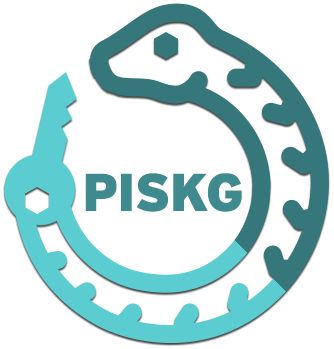
<style>
.page{position:relative;width:334px;height:349px;background:#ffffff}
.page>*{position:absolute;margin:0}
.t1{font:53px "Interstate-Black";letter-spacing:-0.02em;color:#3e8a8e}
</style>
<div class="page">
<p class="t1" style="left:85px;top:173px;width:157px;height:39px">PISKG</p>
</div>
